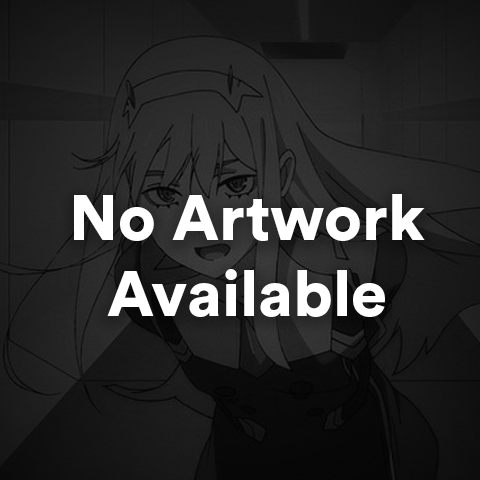
<style>
.page{position:relative;width:480px;height:480px}
.page>*{position:absolute;margin:0}
.t1{font:64px "CircularStd-Black";color:#ffffff}
</style>
<div class="page">
<p class="t1" style="left:74px;top:194px;width:351px;height:123px;text-align:center">No Artwork<br>Available</p>
</div>
